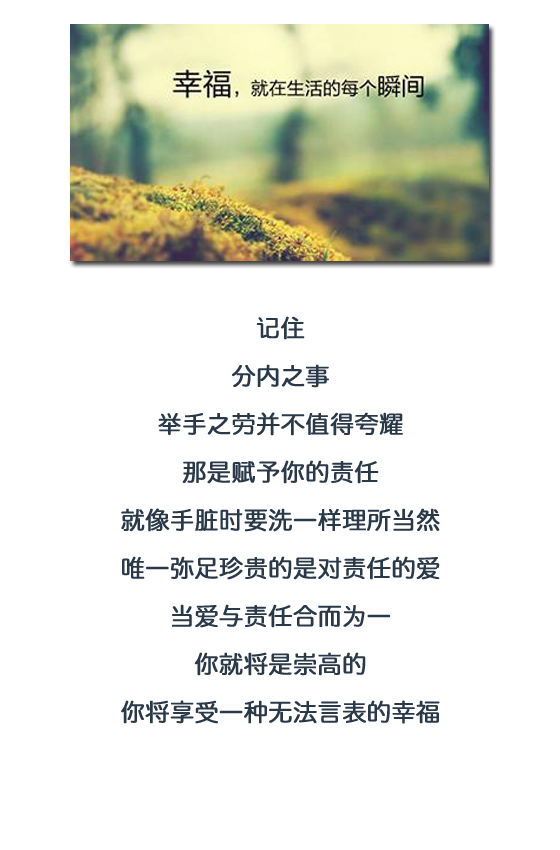
<style>
.page{position:relative;width:560px;height:850px;background:#ffffff}
.page>*{position:absolute;margin:0}
.t1{font:24px/48px "QingYuanMono";color:#2a394a;font-weight:bold}
</style>
<div class="page">
<p class="t1" style="left:121px;top:316px;width:319px;height:408px;text-align:center">记住<br>分内之事<br>举手之劳并不值得夸耀<br>那是赋予你的责任<br>就像手脏时要洗一样理所当然<br>唯一弥足珍贵的是对责任的爱<br>当爱与责任合而为一<br>你就将是崇高的<br>你将享受一种无法言表的幸福</p>
</div>
